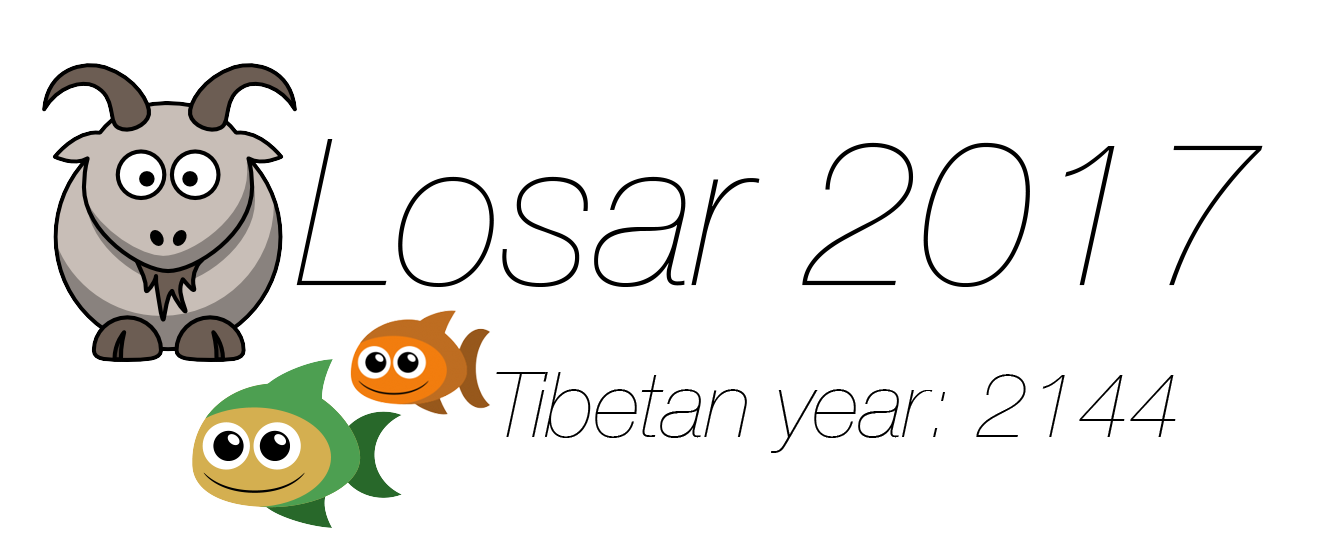
<style>
.page{position:relative;width:1323px;height:542px;background:#ffffff}
.page>*{position:absolute;margin:0}
.t1{font:204.8px "HelveticaNeue-UltraLightItalic";color:#000000}
.t2{font:91.2px "HelveticaNeue-UltraLightItalic";color:#000000}
</style>
<div class="page">
<p class="t1" style="left:296px;top:139px;width:967px;height:148px">Losar 2017</p>
<p class="t2" style="left:496px;top:372px;width:680px;height:81px">Tibetan year: 2144</p>
</div>
